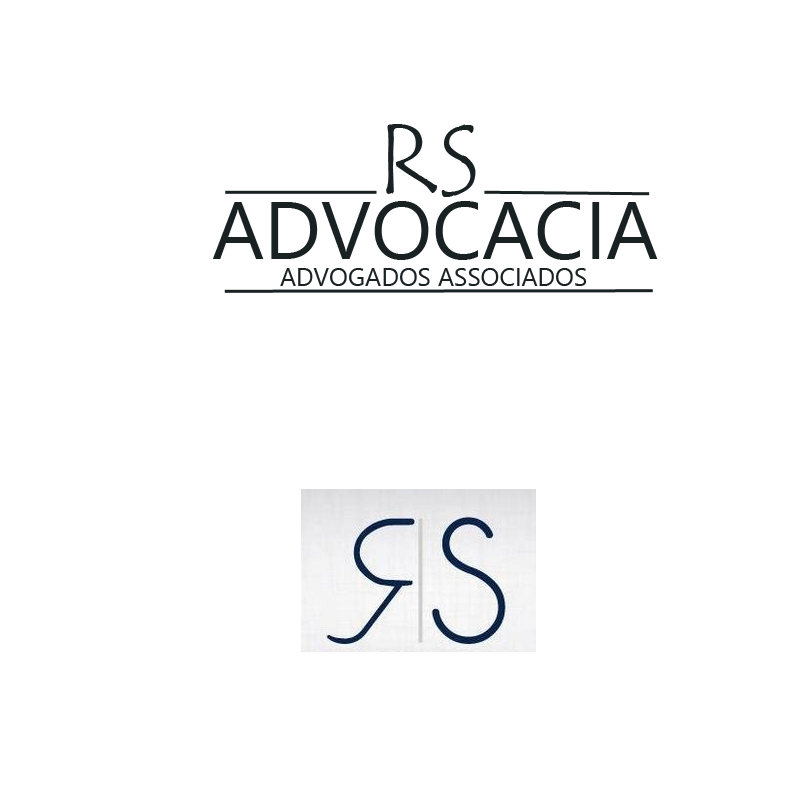
<style>
.page{position:relative;width:800px;height:800px;background:#ffffff}
.page>*{position:absolute;margin:0}
.t1{font:100px "TempusSansITC";color:#192123}
.t2{font:81px "SegoeUI";color:#192123}
.t3{font:25px "SegoeUI";color:#192123}
</style>
<div class="page">
<p class="t1" style="left:386px;top:124px;width:90px;height:73px">RS</p>
<p class="t2" style="left:213px;top:201px;width:445px;height:59px">ADVOCACIA</p>
<p class="t3" style="left:280px;top:268px;width:307px;height:18px">ADVOGADOS ASSOCIADOS</p>
</div>
